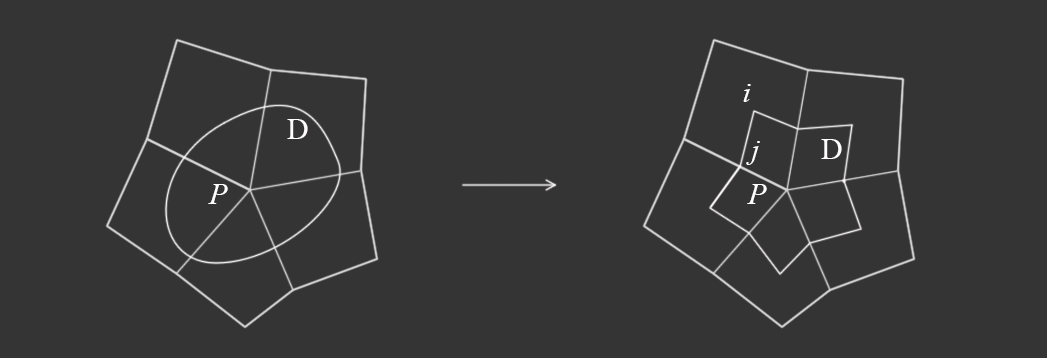
<style>
.page{position:relative;width:1047px;height:358px;background:#343434}
.page>*{position:absolute;margin:0}
.t1{font:30px "TimesNewRomanPS-ItalicMT";color:#ffffff}
.t2{font:30px "TimesNewRomanPSMT";color:#fffdfd}
</style>
<div class="page">
<p class="t1" style="left:743px;top:84px;width:8px;height:18px">i</p>
<p class="t2" style="left:287px;top:119px;width:21px;height:20px">D</p>
<p class="t1" style="left:746px;top:141px;width:14px;height:24px">j</p>
<p class="t2" style="left:821px;top:139px;width:21px;height:20px">D</p>
<p class="t1" style="left:208px;top:184px;width:20px;height:20px">P</p>
<p class="t1" style="left:747px;top:184px;width:20px;height:20px">P</p>
</div>
